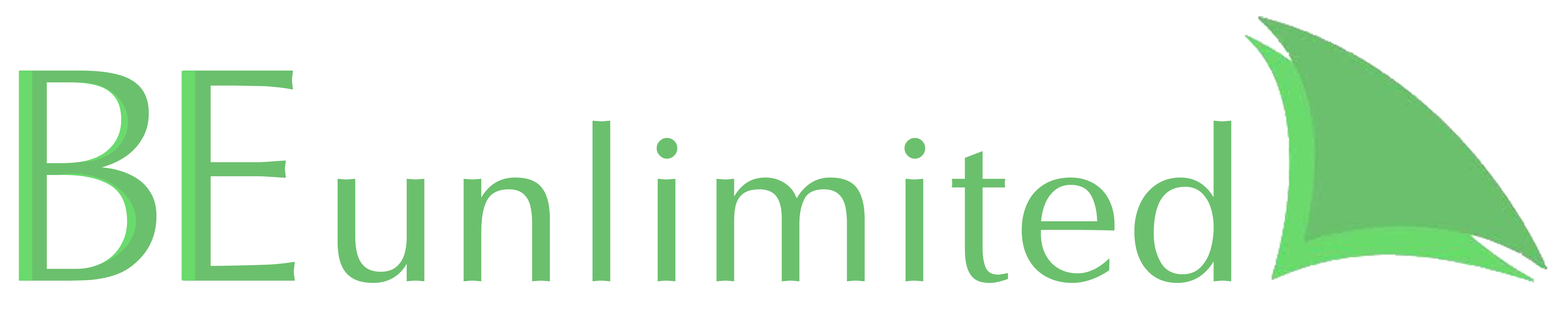
<style>
.page{position:relative;width:1568px;height:311px;background:#ffffff}
.page>*{position:absolute;margin:0}
.t1{font:307.8px "Optima";letter-spacing:-0.1em;color:#6bc06d;font-weight:bold}
.t2{font:212.9px "Optima";color:#6bc06d;font-weight:bold}
</style>
<div class="page">
<p class="t1" style="left:19px;top:71px;width:276px;height:210px">BE</p>
<p class="t2" style="left:338px;top:121px;width:893px;height:162px">unlimited</p>
</div>
